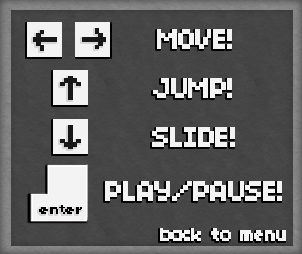
<style>
.page{position:relative;width:302px;height:254px}
.page>*{position:absolute;margin:0}
.t1{font:29.6px "04b03";letter-spacing:-0.05em;color:#f3f3f3;font-weight:bold}
.t2{font:14px "04b03";letter-spacing:-0.05em;color:#000000;font-weight:bold}
.t3{font:18.8px "04b03";letter-spacing:-0.05em;color:#f3f3f3;font-weight:bold}
</style>
<div class="page">
<p class="t1" style="left:157px;top:29px;width:75px;height:20px">MOVE!</p>
<p class="t1" style="left:153px;top:78px;width:79px;height:20px">JUMP!</p>
<p class="t1" style="left:152px;top:127px;width:83px;height:20px">SLIDE!</p>
<p class="t1" style="left:105px;top:181px;width:177px;height:20px">PLAY/PAUSE!</p>
<p class="t2" style="left:39px;top:205px;width:43px;height:9px">enter</p>
<p class="t3" style="left:160px;top:228px;width:126px;height:13px">back to menu</p>
</div>
